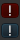
<style>
.page{position:relative;width:20px;height:40px;background:#333333}
.page>*{position:absolute;margin:0}
.t1{font:15px "MyriadPro-Regular"}
</style>
<div class="page">
<p class="t1" style="left:9px;top:5px;width:2px;height:11px">!</p>
<p class="t1" style="left:9px;top:25px;width:2px;height:11px">!</p>
</div>
